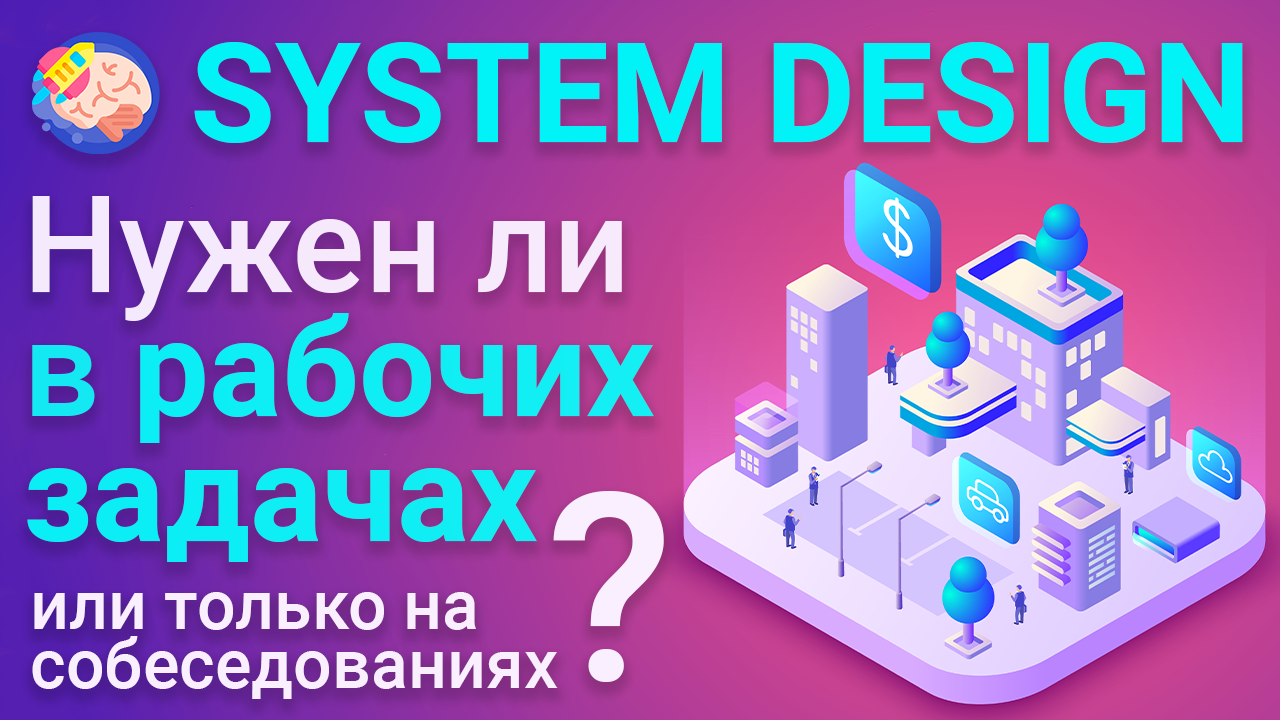
<style>
.page{position:relative;width:1280px;height:720px}
.page>*{position:absolute;margin:0}
.t1{font:138.6px "Roboto-Bold";color:#02f3f7}
.t2{font:134.9px/124.5px "Roboto-Bold";color:#02f3f7}
.t3{font:134.9px/124.5px "Roboto-Medium";color:#f9eeff}
.t4{font:134.9px/124.5px "Roboto-Medium";color:#0feef5}
.t5{font:262.5px "Roboto-Medium";color:#faefff}
.t6{font:68.1px/58.3px "Roboto-Medium";color:#faefff}
</style>
<div class="page">
<p class="t1" style="left:194px;top:42px;width:1049px;height:101px">SYSTEM DESIGN</p>
<p class="t2" style="left:27px;top:196px;width:627px;height:366px;opacity:0.97"><span class="t3">Нужен ли<br></span><span class="t4">в </span>рабочих<br>задачах</p>
<p class="t5" style="left:553px;top:491px;width:111px;height:191px">?</p>
<p class="t6" style="left:32px;top:592px;width:526px;height:107px">или только на <br>собеседованиях</p>
</div>
